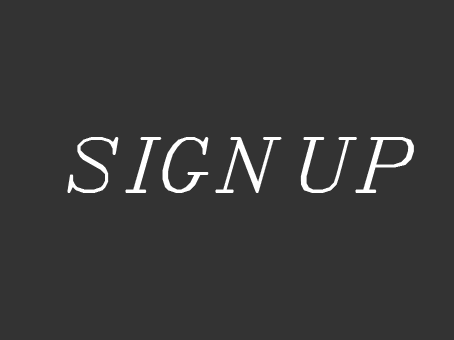
<style>
.page{position:relative;width:454px;height:340px;background:#333333}
.page>*{position:absolute;margin:0}
.t1{font:72px "SWItal";color:#ffffff}
</style>
<div class="page">
<p class="t1" style="left:67px;top:137px;width:347px;height:56px">SIGN UP</p>
</div>
